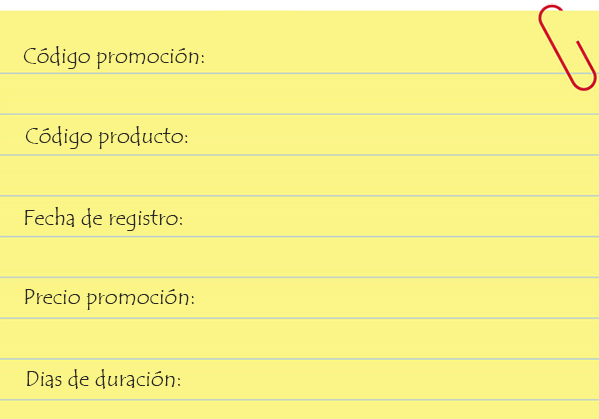
<style>
.page{position:relative;width:599px;height:419px;background:#fbf587}
.page>*{position:absolute;margin:0}
.t1{font:22px "TempusSansITC";color:#282828}
</style>
<div class="page">
<p class="t1" style="left:23px;top:46px;width:181px;height:23px">Código promoción:</p>
<p class="t1" style="left:25px;top:126px;width:163px;height:23px">Código producto:</p>
<p class="t1" style="left:25px;top:207px;width:158px;height:24px">Fecha de registro:</p>
<p class="t1" style="left:25px;top:289px;width:169px;height:21px">Precio promoción:</p>
<p class="t1" style="left:27px;top:369px;width:154px;height:20px">Dias de duración:</p>
</div>
